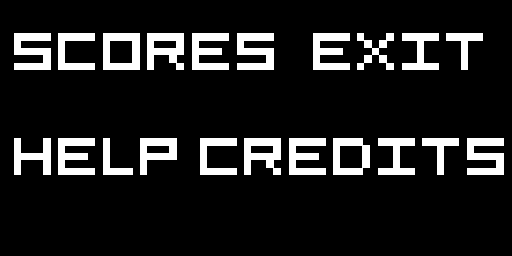
<style>
.page{position:relative;width:512px;height:256px;background:#000000}
.page>*{position:absolute;margin:0}
.t1{font:59.5px "5x5-Pixel";color:#ffffff}
</style>
<div class="page">
<p class="t1" style="left:14px;top:33px;width:260px;height:37px">scores</p>
<p class="t1" style="left:313px;top:33px;width:170px;height:37px">EXIT</p>
<p class="t1" style="left:14px;top:138px;width:163px;height:37px">help</p>
<p class="t1" style="left:200px;top:138px;width:304px;height:37px">credits</p>
</div>
